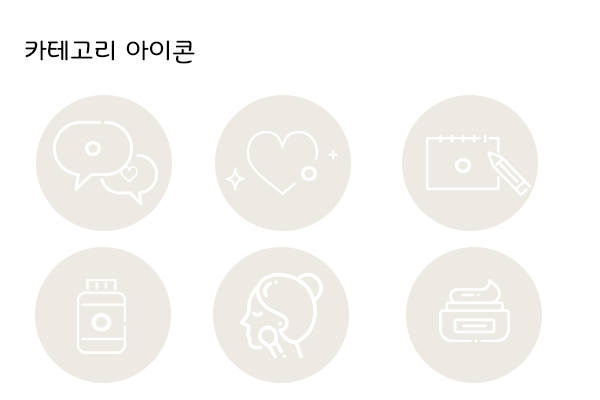
<style>
.page{position:relative;width:600px;height:400px;background:#ffffff}
.page>*{position:absolute;margin:0}
.t1{font:24px "Binggrae";color:#000000}
</style>
<div class="page">
<p class="t1" style="left:25px;top:40px;width:170px;height:24px">카테고리 아이콘</p>
</div>
